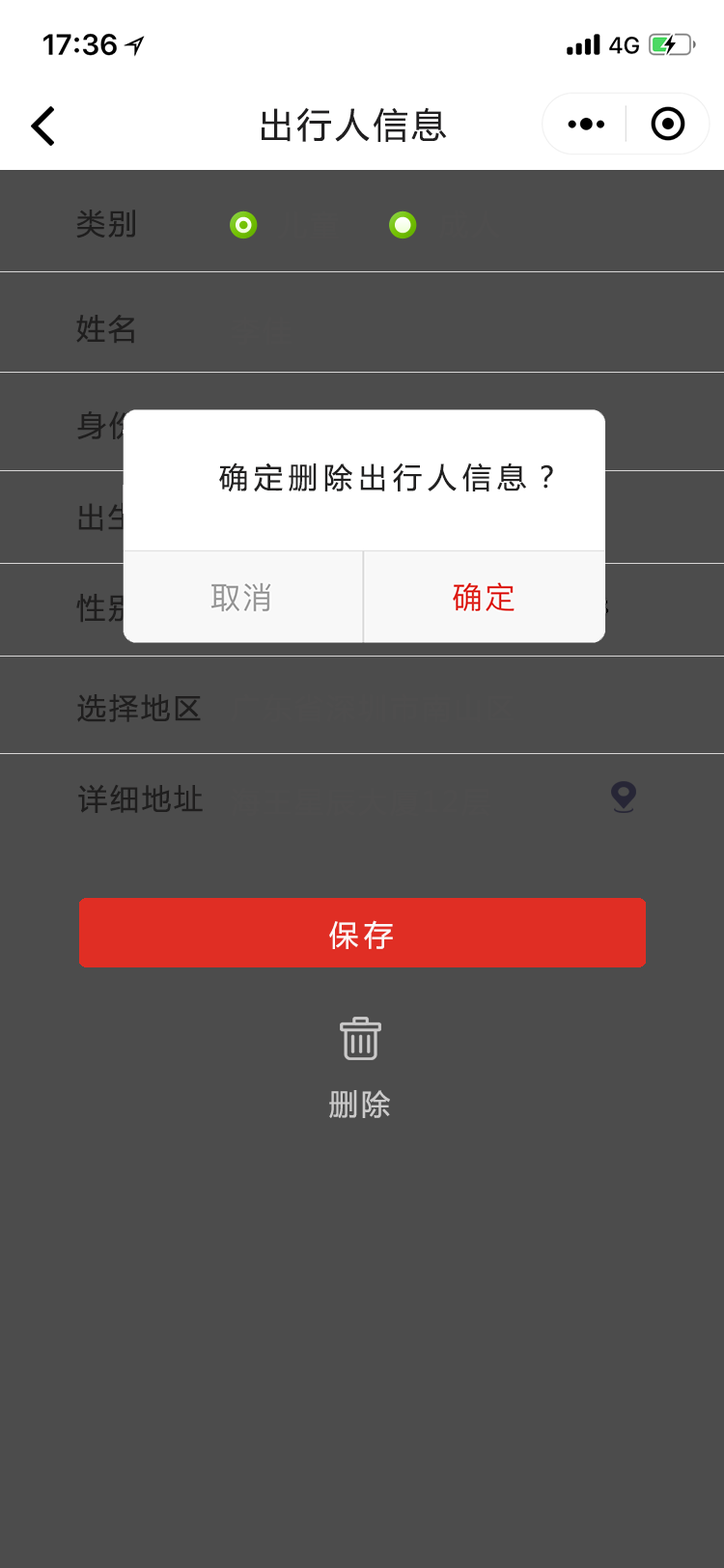
<style>
.page{position:relative;width:724px;height:1568px;background:#4c4c4c}
.page>*{position:absolute;margin:0}
.t1{font:34.8px "MicrosoftYaHei";letter-spacing:0.1em;color:#201f20}
.t2{font:29px "MicrosoftYaHei";letter-spacing:0.1em;color:#1f1e1e}
.t3{font:29px "MicrosoftYaHei";letter-spacing:0.2em;color:#212020}
.t4{font:29px "MicrosoftYaHei";letter-spacing:0.2em;color:#fcf8f8}
.t5{font:29px "MicrosoftYaHei";letter-spacing:0.1em;color:#cbcaca}
</style>
<div class="page">
<p class="t1" style="left:262px;top:107px;width:185px;height:35px">出行人信息</p>
<p class="t2" style="left:76px;top:210px;width:59px;height:28px">类别</p>
<p class="t2" style="left:76px;top:315px;width:58px;height:29px">姓名</p>
<p class="t3" style="left:219px;top:462px;width:334px;height:30px">确定删除出行人信息？</p>
<p class="t2" style="left:77px;top:694px;width:124px;height:28px">选择地区</p>
<p class="t2" style="left:78px;top:784px;width:125px;height:29px">详细地址</p>
<p class="t4" style="left:329px;top:920px;width:64px;height:29px">保存</p>
<p class="t5" style="left:329px;top:1090px;width:61px;height:28px">删除</p>
</div>
